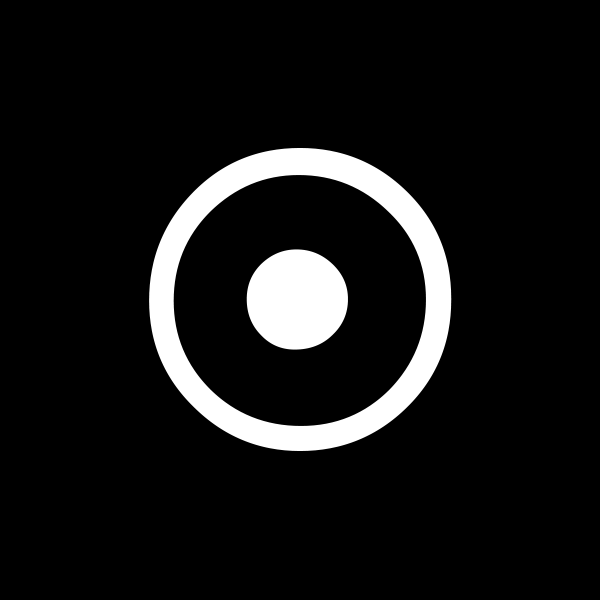
<style>
.page{position:relative;width:600px;height:600px;background:#000000}
.page>*{position:absolute;margin:0}
.t1{font:350px "AppleGothic";color:#ffffff}
</style>
<div class="page">
<p class="t1" style="left:149px;top:148px;width:303px;height:303px">☉</p>
</div>
